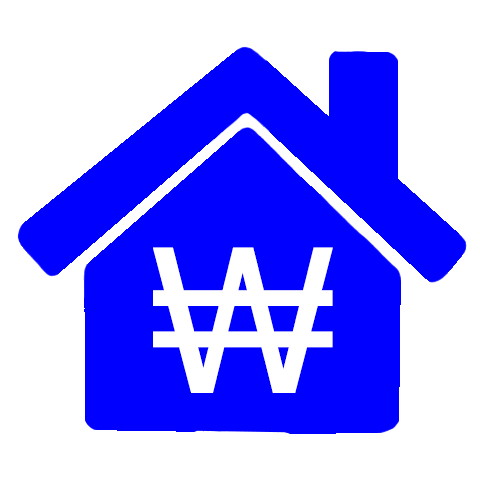
<style>
.page{position:relative;width:480px;height:480px;background:#ffffff}
.page>*{position:absolute;margin:0}
.t1{font:200px "Verdana";color:#ffffff}
</style>
<div class="page">
<p class="t1" style="left:153px;top:247px;width:180px;height:146px">₩</p>
</div>
